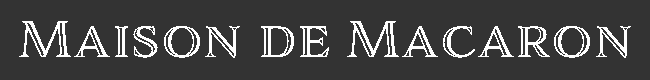
<style>
.page{position:relative;width:650px;height:80px;background:#333333}
.page>*{position:absolute;margin:0}
.t1{font:48px "AdornSEngraved";letter-spacing:0.01em;color:#ffffff}
</style>
<div class="page">
<p class="t1" style="left:19px;top:21px;width:612px;height:37px">Maison de Macaron</p>
</div>
